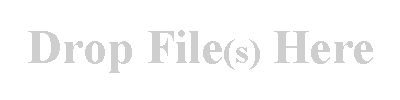
<style>
.page{position:relative;width:400px;height:100px;background:#ffffff}
.page>*{position:absolute;margin:0}
.t1{font:48px "TimesNewRomanPS-BoldMT";color:#cdcecd}
.t2{font:36px "TimesNewRomanPS-BoldMT";color:#cdcecd}
</style>
<div class="page">
<p class="t1" style="left:28px;top:30px;width:345px;height:43px">Drop File<span class="t2">(s)</span> Here</p>
</div>
